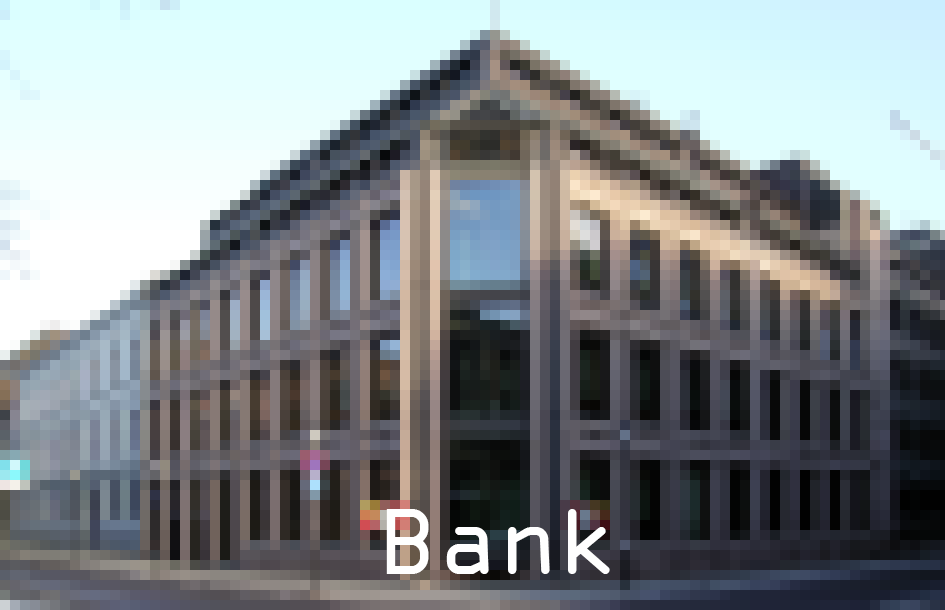
<style>
.page{position:relative;width:945px;height:610px}
.page>*{position:absolute;margin:0}
.t1{font:100px "OCRAExtended";color:#ffffff}
</style>
<div class="page">
<p class="t1" style="left:386px;top:509px;width:224px;height:65px">Bank</p>
</div>
